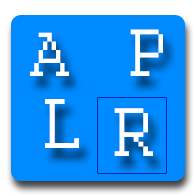
<style>
.page{position:relative;width:196px;height:196px;background:#008aff}
.page>*{position:absolute;margin:0}
.t1{font:74.2px "Courier";color:#ffffff}
.t2{font:69.2px "Courier";color:#ffffff}
.t3{font:78.2px "Courier";color:#ffffff}
.t4{font:76.2px "Courier";color:#ffffff}
</style>
<div class="page">
<p class="t1" style="left:130px;top:29px;width:33px;height:47px">P</p>
<p class="t2" style="left:30px;top:32px;width:39px;height:44px">A</p>
<p class="t3" style="left:45px;top:99px;width:34px;height:49px">L</p>
<p class="t4" style="left:114px;top:108px;width:39px;height:48px">R</p>
</div>
